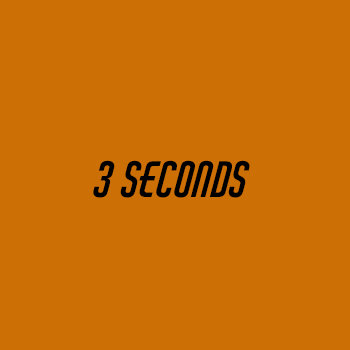
<style>
.page{position:relative;width:350px;height:350px;background:#cc6f04}
.page>*{position:absolute;margin:0}
.t1{font:47.7px "AirAmerica-Regular";color:#000000}
</style>
<div class="page">
<p class="t1" style="left:93px;top:160px;width:157px;height:38px">3 Seconds</p>
</div>
